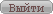
<style>
.page{position:relative;width:53px;height:14px}
.page>*{position:absolute;margin:0}
.t1{font:12px "CourierNewPSMT";color:#6f4f4f}
</style>
<div class="page">
<p class="t1" style="left:9px;top:3px;width:35px;height:9px">Выйти</p>
</div>
